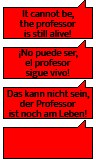
<style>
.page{position:relative;width:96px;height:160px;background:#ff0000}
.page>*{position:absolute;margin:0}
.t1{font:10px/10px "MuktaVaani-Regular";color:#000000}
</style>
<div class="page">
<p class="t1" style="left:7px;top:10px;width:83px;height:107px;text-align:center">It cannot be,<br>the professor<br>is still alive!<br><br>¡No puede ser,<br>el profesor<br>sigue vivo!<br><br>Das kann nicht sein,<br>der Professor<br>ist noch am Leben!</p>
</div>
